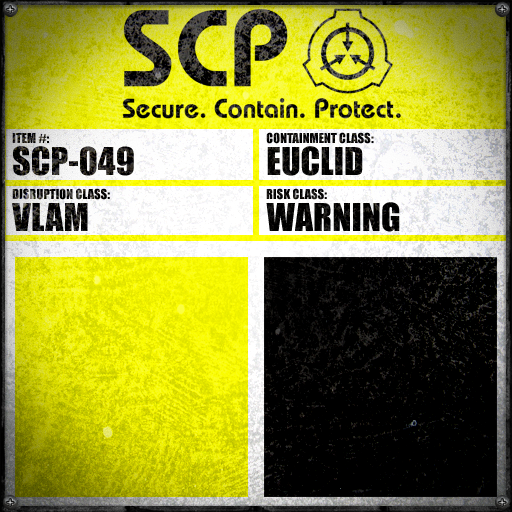
<style>
.page{position:relative;width:512px;height:512px}
.page>*{position:absolute;margin:0}
.t1{font:12.8px "Impact";text-transform:uppercase}
.t2{font:35.6px/32.1px "Impact"}
.t3{font:12.8px "Impact";color:#000000;text-transform:uppercase}
.t4{font:35.6px/32.1px "Impact";color:#000000;text-transform:uppercase}
.t5{font:35.6px/32.1px "Impact";text-transform:uppercase}
</style>
<div class="page">
<p class="t1" style="left:12px;top:133px;width:122px;height:43px">Item #:<br><span class="t2">SCP-049</span></p>
<p class="t3" style="left:266px;top:132px;width:108px;height:44px">Containment Class:<br><span class="t4">Euclid</span></p>
<p class="t1" style="left:12px;top:188px;width:98px;height:43px">Disruption Class:<br><span class="t5">Vlam</span></p>
<p class="t3" style="left:266px;top:188px;width:134px;height:44px">Risk Class:<br><span class="t4">Warning</span></p>
</div>
